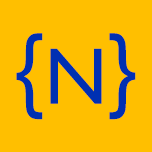
<style>
.page{position:relative;width:152px;height:152px;background:#ffbf00}
.page>*{position:absolute;margin:0}
.t1{font:91.7px "GillSans";color:#0030b2}
.t2{font:80.5px "GillSans";color:#0030b2}
</style>
<div class="page">
<p class="t1" style="left:16px;top:33px;width:120px;height:87px">{<span class="t2">N</span>}</p>
</div>
